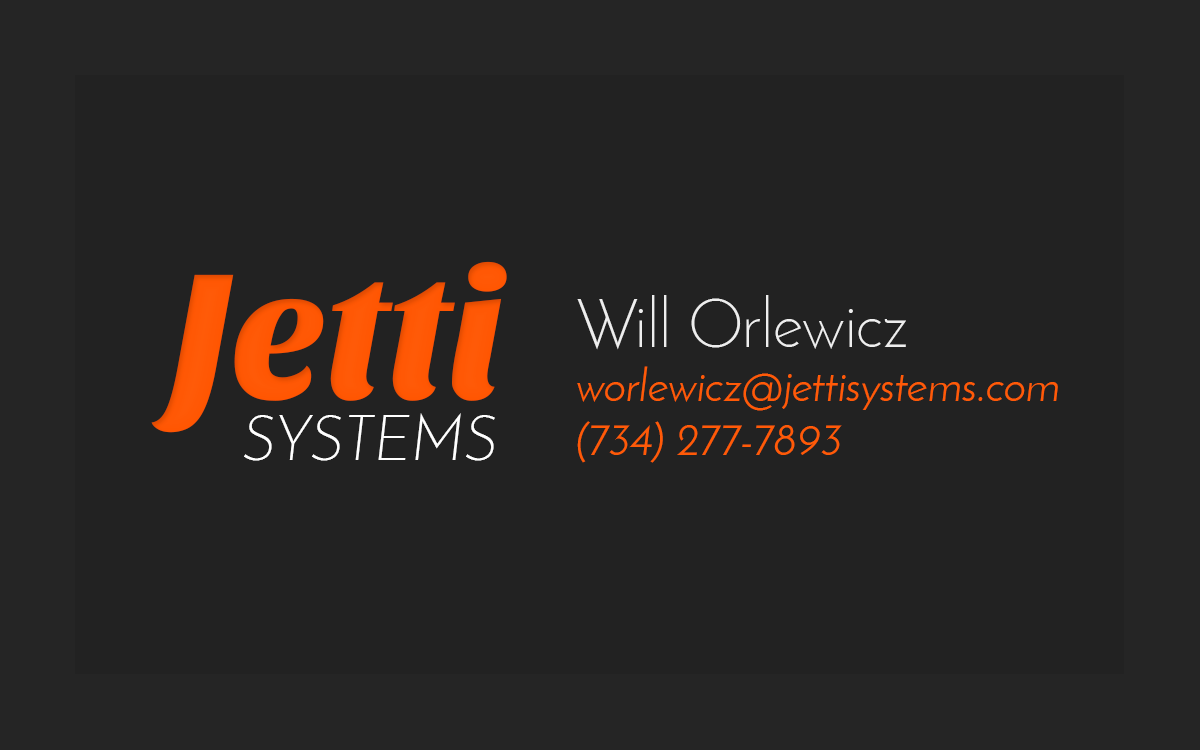
<style>
.page{position:relative;width:1200px;height:750px;background:#222222}
.page>*{position:absolute;margin:0}
.t1{font:185.5px "SansitaOne";letter-spacing:-0.01em;color:#ff5400;scale:0.95 1}
.t2{font:44.7px "JosefinSans";color:#ff5a07}
.t3{font:67.1px "JosefinSans-Light";color:#eeeeee}
.t4{font:62.6px "JosefinSans-LightItalic";letter-spacing:0.01em;color:#ffffff;text-transform:uppercase;scale:0.95 1}
</style>
<div class="page">
<p class="t1" style="left:151px;top:261px;width:356px;height:172px">Jetti</p>
<p class="t2" style="left:577px;top:295px;width:481px;height:168px"><span class="t3">Will Orlewicz<br></span>worlewicz@jettisystems.com<br>(734) 277-7893</p>
<p class="t4" style="left:244px;top:413px;width:251px;height:48px">systems</p>
</div>
